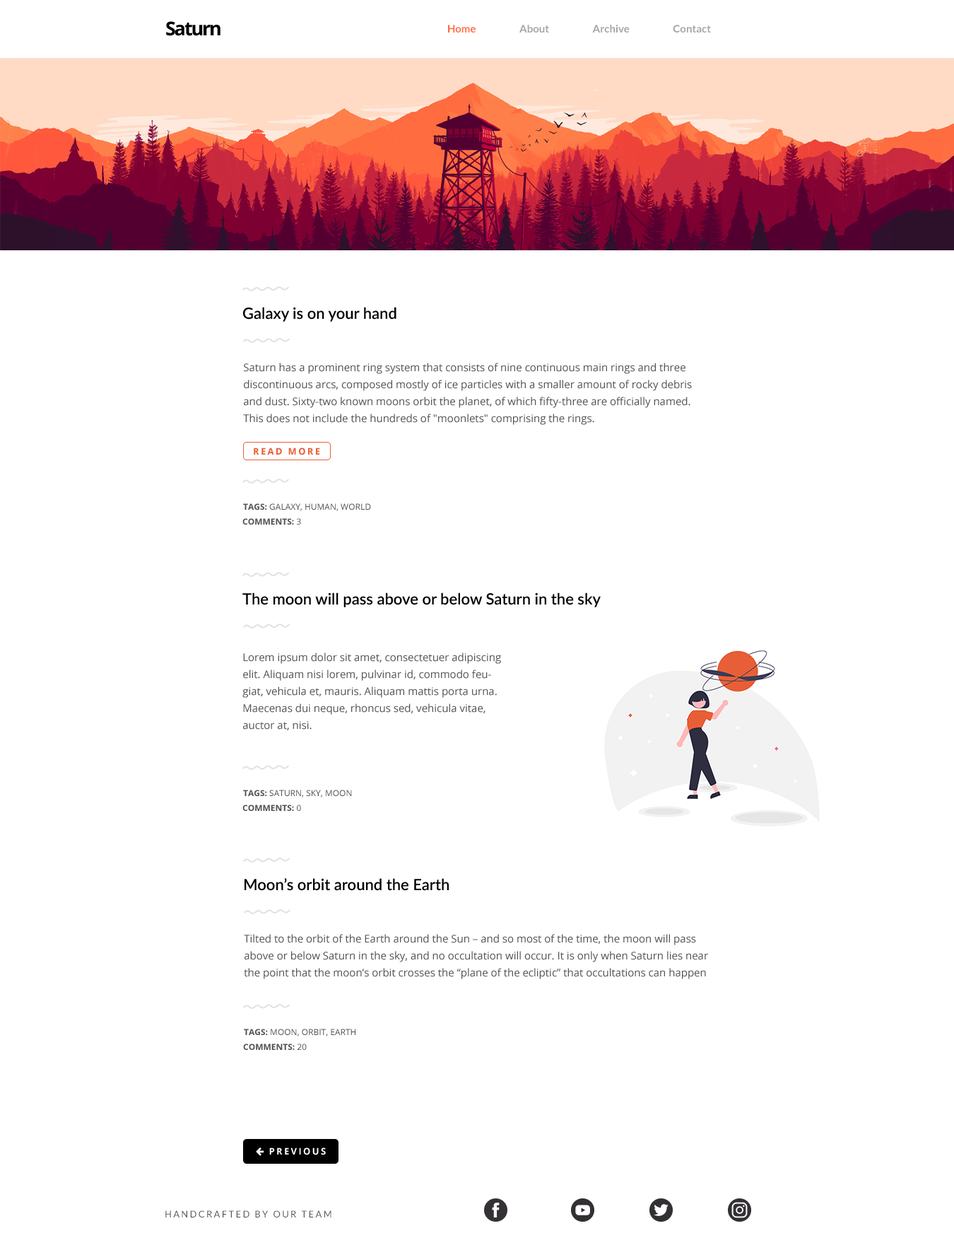
<style>
.page{position:relative;width:954px;height:1250px;background:#ffffff}
.page>*{position:absolute;margin:0}
.t1{font:19.1px "OpenSans-Bold";letter-spacing:-0.08em;color:#000000}
.t2{font:10.6px "Lato-Bold";color:#a4a4a4}
.t3{font:10.6px "Lato-Bold";color:#ff6c40}
.t4{font:15.6px "Lato-Semibold";color:#000000}
.t5{font:10.6px/17px "OpenSans";color:#535353}
.t6{font:9.2px "OpenSans-Bold";letter-spacing:0.18em;color:#e85f37;text-transform:uppercase}
.t7{font:8.5px "OpenSans";color:#535353}
.t8{font:8.5px "OpenSans-Bold";color:#535353}
.t9{font:9.2px "Lato-Regular";letter-spacing:0.18em;color:#525252;text-transform:uppercase}
</style>
<div class="page">
<p class="t1" style="left:166px;top:21px;width:55px;height:15px">Saturn</p>
<p class="t2" style="left:448px;top:25px;width:263px;height:8px"><span class="t3">Home</span> About Archive Contact</p>
<p class="t4" style="left:243px;top:307px;width:154px;height:15px">Galaxy is on your hand</p>
<p class="t5" style="left:243px;top:363px;width:449px;height:62px">Saturn has a prominent ring system that consists of nine continuous main rings and three discontinuous arcs, composed mostly of ice particles with a smaller amount of rocky debris and dust. Sixty-two known moons orbit the planet, of which fifty-three are officially named. This does not include the hundreds of "moonlets" comprising the rings.</p>
<p class="t6" style="left:254px;top:447px;width:66px;height:8px">READ MORE</p>
<p class="t7" style="left:243px;top:503px;width:128px;height:8px"><span class="t8">TAGS: </span>GALAXY, HUMAN, WORLD</p>
<p class="t8" style="left:242px;top:518px;width:59px;height:6px">COMMENTS: <span class="t7">3</span></p>
<p class="t4" style="left:242px;top:592px;width:359px;height:15px">The moon will pass above or below Saturn in the sky</p>
<p class="t5" style="left:242px;top:652px;width:259px;height:78px">Lorem ipsum dolor sit amet, consectetuer adipiscing elit. Aliquam nisi lorem, pulvinar id, commodo feugiat, vehicula et, mauris. Aliquam mattis porta urna. Maecenas dui neque, rhoncus sed, vehicula vitae, auctor at, nisi.</p>
<p class="t7" style="left:243px;top:790px;width:109px;height:7px"><span class="t8">TAGS: </span>SATURN, SKY, MOON</p>
<p class="t8" style="left:242px;top:804px;width:59px;height:7px">COMMENTS: <span class="t7">0</span></p>
<p class="t4" style="left:245px;top:878px;width:204px;height:13px">Moon’s orbit around the Earth</p>
<p class="t5" style="left:244px;top:934px;width:464px;height:45px">Tilted to the orbit of the Earth around the Sun – and so most of the time, the moon will pass above or below Saturn in the sky, and no occultation will occur. It is only when Saturn lies near the point that the moon’s orbit crosses the “plane of the ecliptic” that occultations can happen</p>
<p class="t7" style="left:244px;top:1028px;width:112px;height:8px"><span class="t8">TAGS: </span>MOON, ORBIT, EARTH</p>
<p class="t8" style="left:243px;top:1043px;width:64px;height:7px">COMMENTS: <span class="t7">20</span></p>
<p class="t9" style="left:165px;top:1210px;width:166px;height:7px">handcrafted by OUR TEAM</p>
</div>
